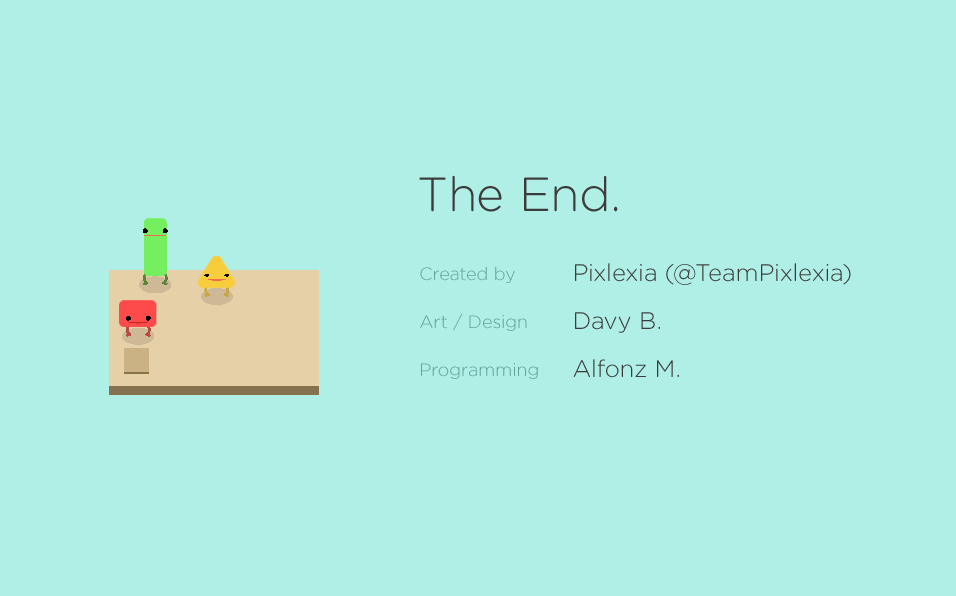
<style>
.page{position:relative;width:956px;height:596px;background:#afefe6}
.page>*{position:absolute;margin:0}
.t1{font:48px "GothamRounded-Light";color:#3c3c3c}
.t2{font:18px/48px "GothamRounded-Light";color:#5fa399}
.t3{font:24px/48px "GothamRounded-Light";color:#3c3c3c}
</style>
<div class="page">
<p class="t1" style="left:419px;top:175px;width:199px;height:37px">The End.</p>
<p class="t2" style="left:420px;top:266px;width:118px;height:113px">Created by<br>Art / Design<br>Programming</p>
<p class="t3" style="left:573px;top:263px;width:278px;height:115px">Pixlexia (@TeamPixlexia)<br>Davy B.<br>Alfonz M.</p>
</div>
